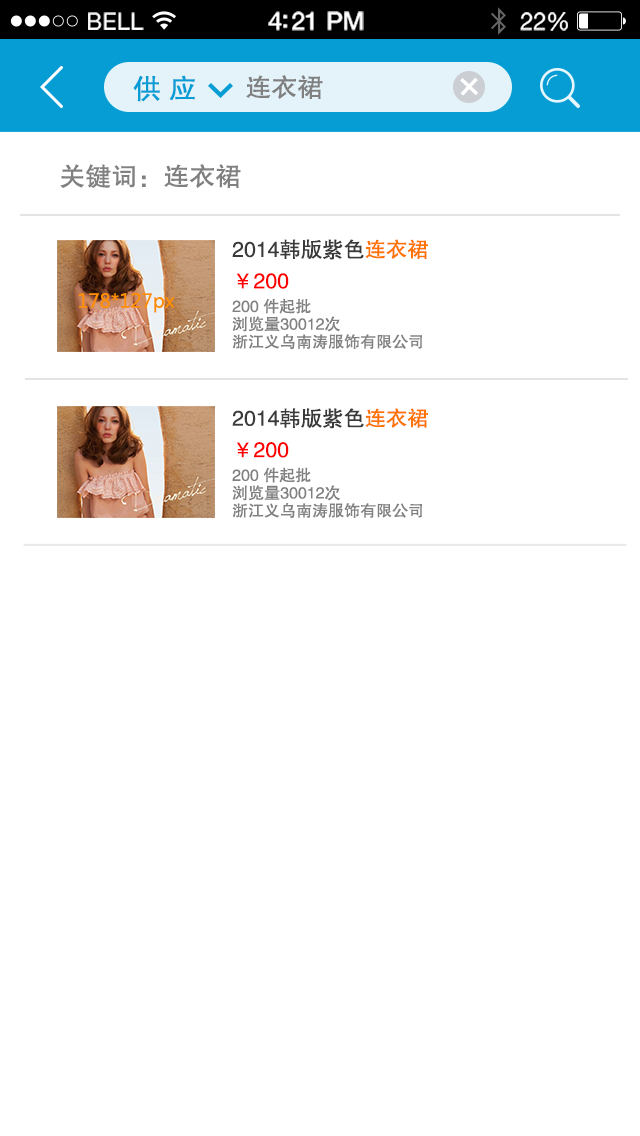
<style>
.page{position:relative;width:640px;height:1136px;background:#ffffff}
.page>*{position:absolute;margin:0}
.t1{font:23.1px "HelveticaNeue";letter-spacing:0.02em;color:#ffffff}
.t2{font:25.1px "HelveticaNeue-Medium";letter-spacing:-0.02em;color:#ffffff}
.t3{font:24.1px "HelveticaNeue";letter-spacing:-0.02em;color:#ffffff}
.t4{font:28px "FZHTJW--GB1-0";color:#069dd4}
.t5{font:26px "FZHTJW--GB1-0";color:#808080}
.t6{font:42.3px "MicrosoftYaHei";color:#ffffff}
.t7{font:16px/4.5px "FZHTJW--GB1-0";color:#808080}
.t8{font:21.3px/4.5px "FZHTJW--GB1-0";color:#3a3a3a}
.t9{font:21.3px/4.5px "FZHTJW--GB1-0";color:#ff7300}
.t10{font:21.3px/4.5px "FZHTJW--GB1-0";color:#ff0000}
.t11{font:19px "MicrosoftYaHei";color:#fe8f02}
</style>
<div class="page">
<p class="t1" style="left:88px;top:12px;width:56px;height:18px">BELL</p>
<p class="t2" style="left:268px;top:11px;width:96px;height:20px">4:21 PM</p>
<p class="t3" style="left:520px;top:12px;width:48px;height:19px">22%</p>
<p class="t4" style="left:133px;top:75px;width:62px;height:27px">供 应</p>
<p class="t5" style="left:246px;top:75px;width:77px;height:24px">连衣裙</p>
<p class="t6" style="left:460px;top:77px;width:18px;height:19px;rotate:43deg">+</p>
<p class="t5" style="left:60px;top:164px;width:181px;height:24px">关键词：连衣裙</p>
<p class="t7" style="left:232px;top:239px;width:196px;height:111px"><span class="t8">2014韩版紫色</span><span class="t9">连衣裙<br><br><br></span><span class="t10"><br>￥200<br><br><br></span>200 件起批<br><br>浏览量30012次<br><br>浙江义乌南涛服饰有限公司</p>
<p class="t11" style="left:78px;top:292px;width:97px;height:21px">178*127px</p>
<p class="t7" style="left:232px;top:408px;width:196px;height:110px"><span class="t8">2014韩版紫色</span><span class="t9">连衣裙<br><br><br></span><span class="t10"><br>￥200<br><br><br></span>200 件起批<br><br>浏览量30012次<br><br>浙江义乌南涛服饰有限公司</p>
</div>
